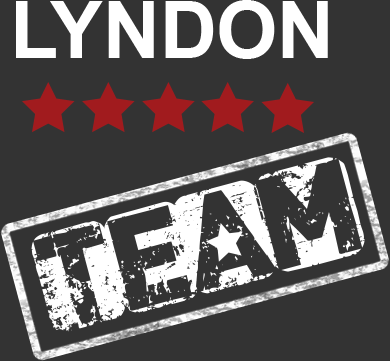
<style>
.page{position:relative;width:390px;height:361px;background:#333333}
.page>*{position:absolute;margin:0}
.t1{font:78.6px "Arial-BoldMT";color:#ffffff}
.t2{font:118.6px "CFPunkisnotDead-Regular";color:#ffffff}
</style>
<div class="page">
<p class="t1" style="left:16px;top:0px;width:312px;height:59px">LYNDON</p>
<p class="t2" style="left:31px;top:157px;width:334px;height:175px;rotate:-15deg">team</p>
</div>
